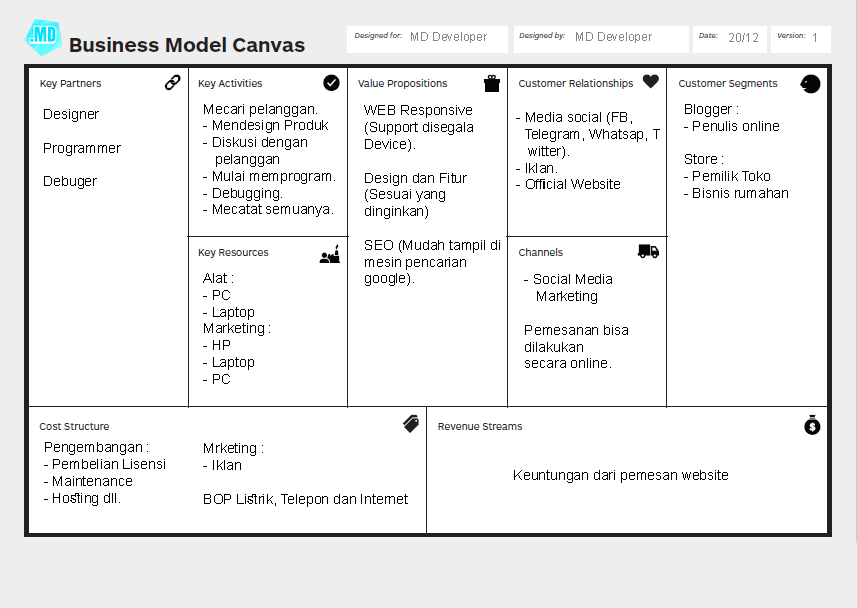
<style>
.page{position:relative;width:857px;height:608px;background:#ffffff}
.page>*{position:absolute;margin:0}
.t1{font:12px "ArialMT";color:#858585}
.t2{font:14px "ArialMT";color:#000000}
</style>
<div class="page">
<p class="t1" style="left:411px;top:32px;width:76px;height:11px">MD Developer</p>
<p class="t1" style="left:576px;top:32px;width:76px;height:11px">MD Developer</p>
<p class="t1" style="left:729px;top:33px;width:29px;height:9px">20/12</p>
<p class="t1" style="left:813px;top:33px;width:3px;height:9px">1</p>
<p class="t2" style="left:44px;top:109px;width:77px;height:80px">Designer<br><br>Programmer<br><br>Debuger</p>
<p class="t2" style="left:203px;top:104px;width:132px;height:113px">Mecari pelanggan.<br>- Mendesign Produk<br>- Diskusi dengan <br>   pelanggan<br>- Mulai memprogram.<br>- Debugging.<br>- Mecatat semuanya.</p>
<p class="t2" style="left:364px;top:105px;width:136px;height:181px">WEB Responsive <br>(Support disegala <br>Device).<br><br>Design dan Fitur <br>(Sesuai yang <br>dinginkan)<br><br>SEO (Mudah tampil di <br>mesin pencarian <br>google).</p>
<p class="t2" style="left:516px;top:112px;width:144px;height:77px">- Media social (FB, <br>  Telegram, Whatsap, T<br>   witter).<br>- Iklan.<br>- Official Website</p>
<p class="t2" style="left:684px;top:104px;width:104px;height:94px">Blogger :<br>- Penulis online<br><br>Store :<br>- Pemilik Toko<br>- Bisnis rumahan</p>
<p class="t2" style="left:203px;top:273px;width:67px;height:111px">Alat :<br>- PC<br>- Laptop<br>Marketing :<br>- HP<br>- Laptop<br>- PC</p>
<p class="t2" style="left:524px;top:274px;width:104px;height:94px">- Social Media <br>   Marketing<br><br>Pemesanan bisa <br>dilakukan <br>secara online.</p>
<p class="t2" style="left:44px;top:442px;width:121px;height:64px">Pengembangan :<br>- Pembelian Lisensi<br>- Maintenance<br>- Hosting dll.</p>
<p class="t2" style="left:203px;top:443px;width:205px;height:64px">Mrketing :<br>- Iklan<br><br>BOP Listrik, Telepon dan Internet</p>
<p class="t2" style="left:514px;top:470px;width:214px;height:13px">Keuntungan dari pemesan website</p>
</div>
